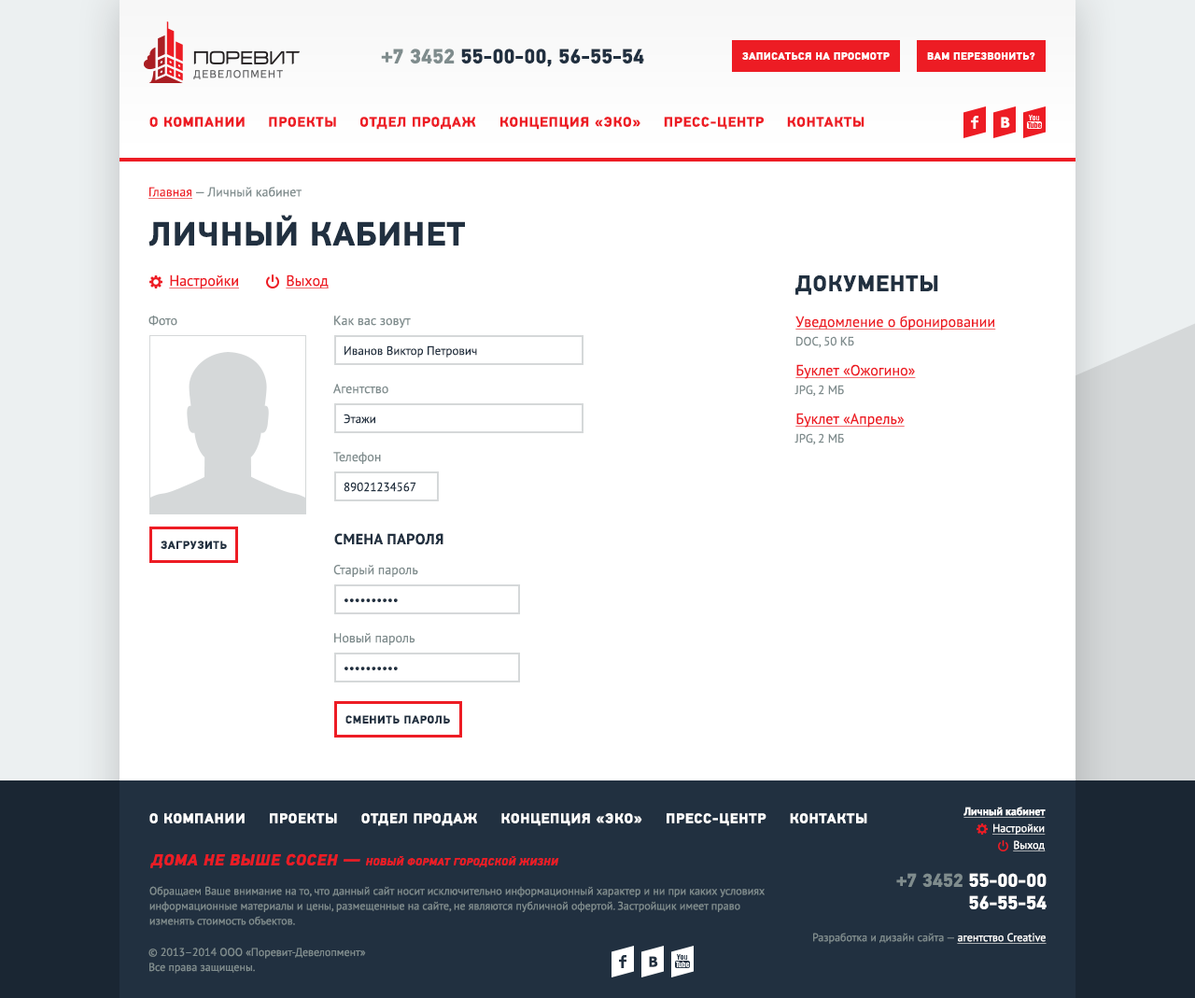
<style>
.page{position:relative;width:1195px;height:998px;background:#ffffff}
.page>*{position:absolute;margin:0}
.t1{font:20.5px "PFDinTextPro-Bold";color:#213040;text-transform:uppercase}
.t2{font:20.5px "PFDinTextPro-Bold";color:#7f8c8d;text-transform:uppercase}
.t3{font:10.3px "PFDinTextPro-Bold";letter-spacing:0.05em;color:#ffffff;text-transform:uppercase}
.t4{font:14px "PFDinTextPro-Bold";letter-spacing:0.05em;color:#ed1c24;text-transform:uppercase}
.t5{font:14px "PFDinTextPro-Bold";color:#ed1c24;text-transform:uppercase}
.t6{font:14px "Tahoma-Bold";letter-spacing:0.05em;color:#ffffff;text-transform:uppercase}
.t7{font:13.1px "PTSans-Regular";color:#7f8c8d}
.t8{font:13.1px "PTSans-Regular";color:#ed1c24;text-decoration:underline}
.t9{font:33.6px "PFDinTextPro-Bold";letter-spacing:0.03em;color:#213040;text-transform:uppercase}
.t10{font:14.9px "PTSans-Regular";color:#ed1c24;text-decoration:underline}
.t11{font:22.4px "PFDinTextPro-Bold";letter-spacing:0.04em;color:#213040;text-transform:uppercase}
.t12{font:12.1px "PTSans-Regular";color:#7f8c8d}
.t13{font:12.1px "PTSans-Regular";color:#213040}
.t14{font:14.9px "PTSans-Bold";letter-spacing:0.03em;color:#213040;text-transform:uppercase}
.t15{font:11.2px "PFDinTextPro-Bold";letter-spacing:0.05em;color:#213040;text-transform:uppercase}
.t16{font:11.2px/16.8px "PTSans-Regular";color:#ffffff;text-decoration:underline}
.t17{font:11.2px/16.8px "PTSans-Bold";color:#ffffff;text-decoration:underline}
.t18{font:14px "PFDinTextPro-Bold";letter-spacing:0.05em;color:#ffffff;text-transform:uppercase}
.t19{font:10.3px "PFDinTextPro-BoldItalic";letter-spacing:0.05em;color:#ed1c24;text-transform:uppercase}
.t20{font:15.9px "PFDinTextPro-BoldItalic";letter-spacing:0.05em;color:#ed1c24;text-transform:uppercase}
.t21{font:18.7px/22.4px "PFDinTextPro-Bold";color:#ffffff;text-transform:uppercase}
.t22{font:18.7px/22.4px "PFDinTextPro-Bold";color:#7f8c8d;text-transform:uppercase}
.t23{font:11.2px/14.9px "PTSans-Regular";color:#7f8c8d}
.t24{font:11.2px "PTSans-Regular";color:#7f8c8d}
.t25{font:11.2px "PTSans-Regular";color:#ffffff;text-decoration:underline}
.t26{font:14px "Tahoma-Bold";letter-spacing:0.05em;color:#213040;text-transform:uppercase}
</style>
<div class="page">
<p class="t1" style="left:381px;top:49px;width:263px;height:18px"><span class="t2">+7 3452 </span>55-00-00, 56-55-54</p>
<p class="t3" style="left:742px;top:52px;width:148px;height:8px">записаться на просмотр</p>
<p class="t3" style="left:927px;top:52px;width:108px;height:8px">вам перезвонить?</p>
<p class="t4" style="left:149px;top:117px;width:715px;height:13px">О компани<span class="t5">и</span>     проект<span class="t5">ы</span>     отдел продаж     концепция «эко<span class="t5">»</span>     пресс-цент<span class="t5">р</span>     контакт<span class="t5">ы</span></p>
<p class="t6" style="left:1001px;top:117px;width:9px;height:11px">В</p>
<p class="t7" style="left:148px;top:187px;width:154px;height:12px"><span class="t8">Главная </span>— Личный кабинет</p>
<p class="t9" style="left:148px;top:215px;width:317px;height:31px">Личный кабинет</p>
<p class="t10" style="left:169px;top:274px;width:70px;height:15px">Настройки</p>
<p class="t10" style="left:286px;top:274px;width:43px;height:14px">Выход</p>
<p class="t11" style="left:795px;top:275px;width:143px;height:20px">документы</p>
<p class="t7" style="left:148px;top:316px;width:29px;height:10px">Фото</p>
<p class="t7" style="left:334px;top:316px;width:77px;height:12px">Как вас зовут</p>
<p class="t10" style="left:795px;top:316px;width:201px;height:14px">Уведомление о бронировании</p>
<p class="t12" style="left:796px;top:336px;width:58px;height:12px">DOC, 50 КБ</p>
<p class="t13" style="left:344px;top:345px;width:133px;height:13px">Иванов Виктор Петрович</p>
<p class="t10" style="left:795px;top:364px;width:121px;height:15px">Буклет «Ожогино»</p>
<p class="t7" style="left:333px;top:384px;width:55px;height:10px">Агентство</p>
<p class="t12" style="left:794px;top:385px;width:50px;height:12px">JPG, 2 МБ</p>
<p class="t13" style="left:344px;top:414px;width:31px;height:10px">Этажи</p>
<p class="t10" style="left:795px;top:413px;width:110px;height:15px">Буклет «Апрель»</p>
<p class="t12" style="left:794px;top:433px;width:50px;height:12px">JPG, 2 МБ</p>
<p class="t7" style="left:333px;top:452px;width:48px;height:12px">Телефон</p>
<p class="t13" style="left:344px;top:482px;width:72px;height:10px">89021234567</p>
<p class="t14" style="left:334px;top:533px;width:109px;height:12px">смена пароля</p>
<p class="t15" style="left:161px;top:541px;width:66px;height:9px">загрузить</p>
<p class="t7" style="left:333px;top:565px;width:85px;height:12px">Старый пароль</p>
<p class="t13" style="left:344px;top:598px;width:54px;height:4px">••••••••••</p>
<p class="t7" style="left:334px;top:633px;width:81px;height:12px">Новый пароль</p>
<p class="t13" style="left:344px;top:667px;width:54px;height:3px">••••••••••</p>
<p class="t15" style="left:345px;top:715px;width:105px;height:9px">сменить пароль</p>
<p class="t16" style="left:963px;top:807px;width:83px;height:44px;text-align:right"><span class="t17">Личный кабинет<br></span>Настройки<br>Выход</p>
<p class="t18" style="left:149px;top:813px;width:718px;height:13px">О компании     проекты     отдел продаж     концепция «эко»     пресс-центр     контакты</p>
<p class="t19" style="left:150px;top:853px;width:409px;height:15px"><span class="t20">дома не выше сосен — </span>новый формат городской жизни</p>
<p class="t21" style="left:896px;top:873px;width:150px;height:36px;text-align:right"><span class="t22">+7 3452 </span>55-00-00<br>56-55-54</p>
<p class="t23" style="left:149px;top:886px;width:616px;height:39px">Обращаем Ваше внимание на то, что данный сайт носит исключительно информационный характер и ни при каких условиях информационные материалы и цены, размещенные на сайте, не являются публичной офертой. Застройщик имеет право изменять стоимость объектов.</p>
<p class="t24" style="left:813px;top:933px;width:233px;height:11px">Разработка и дизайн сайта — <span class="t25">агентство Creative</span></p>
<p class="t23" style="left:148px;top:948px;width:218px;height:26px">© 2013–2014 ООО «Поревит-Девелопмент» <br>Все права защищены.</p>
<p class="t26" style="left:649px;top:956px;width:9px;height:11px">В</p>
</div>
